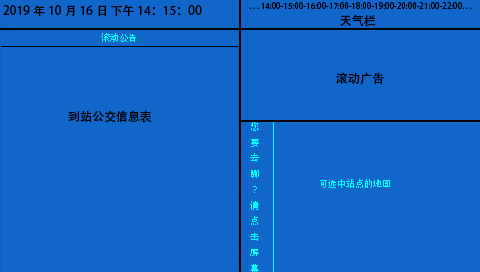
<style>
.page{position:relative;width:480px;height:272px;background:#1166c9}
.page>*{position:absolute;margin:0}
.t1{font:12px "AdobeHeitiStd-Regular";color:#000000}
.t2{font:8px "AdobeHeitiStd-Regular";color:#000000}
.t3{font:9px "AdobeHeitiStd-Regular";color:#00ffff}
</style>
<div class="page">
<p class="t1" style="left:3px;top:5px;width:199px;height:12px">2019年10月16日 下午 14：15：00</p>
<p class="t2" style="left:250px;top:2px;width:222px;height:7px">. . . 14:00-15:00-16:00-17:00-18:00-19:00-20:00-21:00-22:00. . .</p>
<p class="t1" style="left:340px;top:14px;width:36px;height:13px">天气栏</p>
<p class="t3" style="left:101px;top:33px;width:35px;height:9px">滚动公告</p>
<p class="t1" style="left:336px;top:72px;width:48px;height:13px">滚动广告</p>
<p class="t1" style="left:68px;top:110px;width:84px;height:13px">到站公交信息表</p>
<p class="t3" style="left:250px;top:122px;width:9px;height:151px;text-align:center">您要去哪<br>?<br>请点击屏幕</p>
<p class="t3" style="left:320px;top:179px;width:70px;height:9px">可选中站点的地图</p>
</div>
